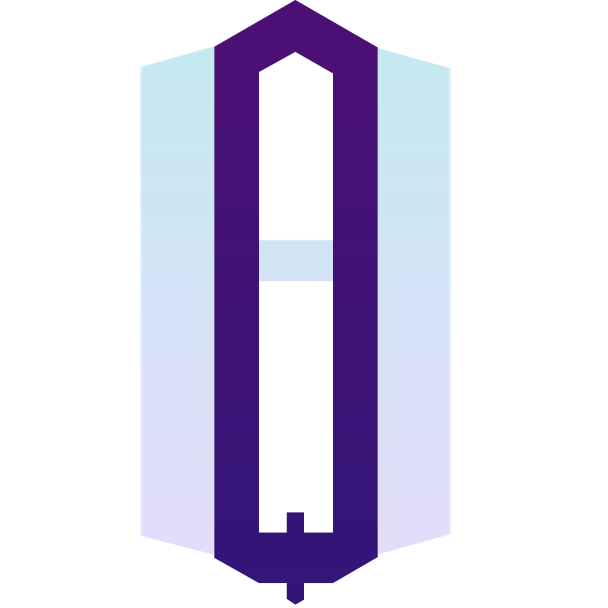
<style>
.page{position:relative;width:608px;height:608px;background:#ffffff}
.page>*{position:absolute;margin:0}
.t1{font:720px "Hex-monograms";letter-spacing:0.01em;color:#3f1277}
</style>
<div class="page">
<p class="t1" style="left:214px;top:0px;width:164px;height:605px">Q</p>
</div>
